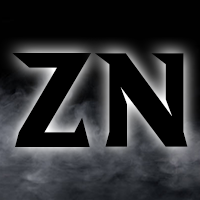
<style>
.page{position:relative;width:200px;height:200px;background:#000000}
.page>*{position:absolute;margin:0}
.t1{font:125.8px "aAbsoluteEmpire";letter-spacing:0.041em;color:#000000}
.t2{font:125.5px "aAbsoluteEmpire";letter-spacing:0.041em;color:#000000}
</style>
<div class="page">
<p class="t1" style="left:12px;top:53px;width:79px;height:94px">Z</p>
<p class="t2" style="left:95px;top:53px;width:93px;height:94px">n</p>
</div>
